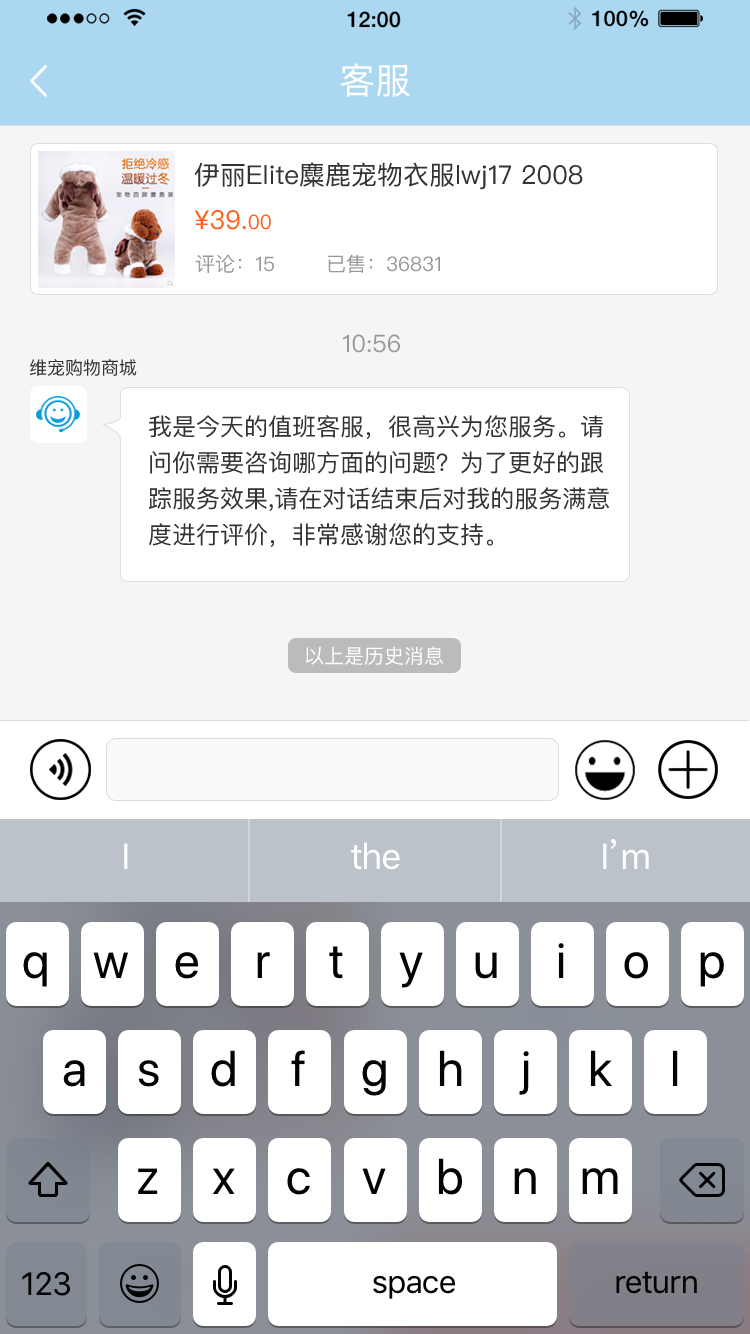
<style>
.page{position:relative;width:750px;height:1334px;background:#ffffff}
.page>*{position:absolute;margin:0}
.t1{font:36px "PingFangSC";color:#ffffff}
.t2{font:26px "PingFangSC";color:#333333}
.t3{font:26px "PingFangSC";color:#ff5c1c}
.t4{font:20px "PingFangSC";color:#ff5c1c}
.t5{font:20px "PingFangSC";color:#999999}
.t6{font:24px "PingFangSC";color:#999999}
.t7{font:18px "PingFangSC-Regular";color:#333333}
.t8{font:24px/36px "PingFangSC";color:#333333}
.t9{font:20px "PingFangSC";color:#ffffff}
</style>
<div class="page">
<p class="t1" style="left:340px;top:63px;width:70px;height:34px">客服</p>
<p class="t2" style="left:194px;top:162px;width:389px;height:28px">伊丽Elite麋鹿宠物衣服lwj17 2008</p>
<p class="t3" style="left:194px;top:210px;width:77px;height:20px">¥39.<span class="t4">00</span></p>
<p class="t5" style="left:195px;top:254px;width:79px;height:19px">评论：15</p>
<p class="t5" style="left:327px;top:254px;width:113px;height:19px">已售：36831</p>
<p class="t6" style="left:343px;top:334px;width:57px;height:19px">10:56</p>
<p class="t7" style="left:29px;top:359px;width:108px;height:17px">维宠购物商城</p>
<p class="t8" style="left:148px;top:415px;width:462px;height:132px">我是今天的值班客服，很高兴为您服务。请问你需要咨询哪方面的问题？为了更好的跟踪服务效果,请在对话结束后对我的服务满意度进行评价，非常感谢您的支持。</p>
<p class="t9" style="left:306px;top:646px;width:138px;height:19px">以上是历史消息</p>
</div>
